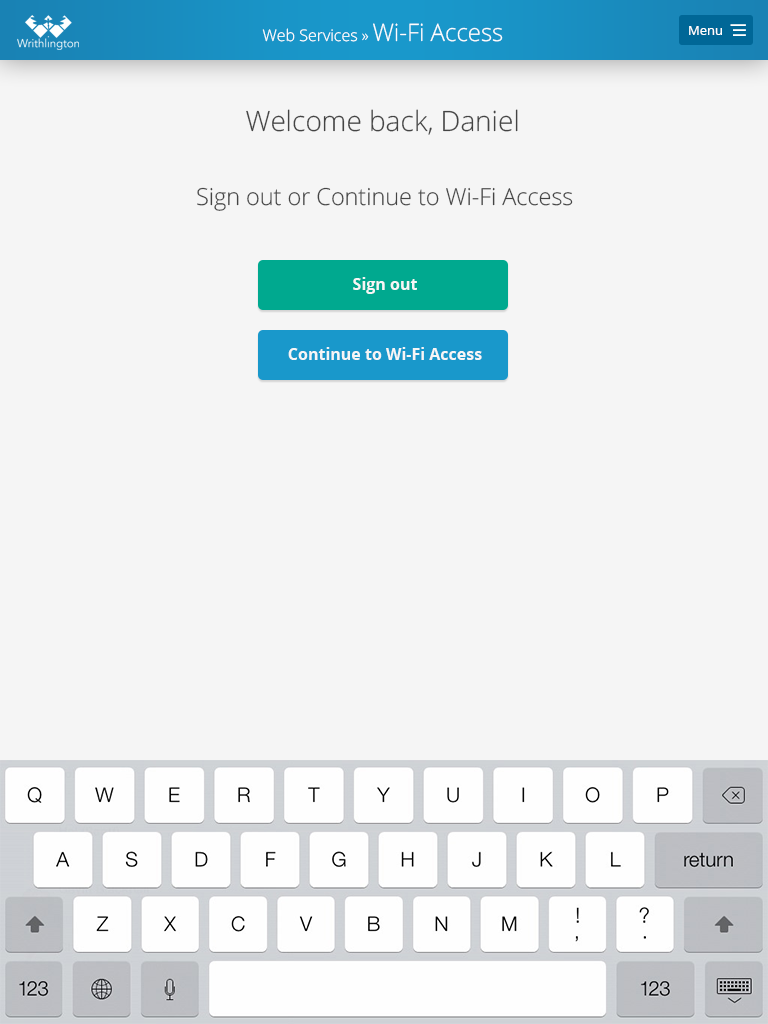
<style>
.page{position:relative;width:768px;height:1024px;background:#f5f5f5}
.page>*{position:absolute;margin:0}
.t1{font:16px "OpenSans-Light";color:#ffffff}
.t2{font:24px "OpenSans-Light";color:#ffffff}
.t3{font:13px "OpenSans";color:#ffffff}
.t4{font:28px "OpenSans-Light";color:#444444}
.t5{font:23.4px "OpenSans-Light";color:#444444}
.t6{font:16px "OpenSans-Bold";color:#f6f6f6}
</style>
<div class="page">
<p class="t1" style="left:262px;top:23px;width:241px;height:19px">Web Services » <span class="t2">Wi-Fi Access</span></p>
<p class="t3" style="left:689px;top:26px;width:33px;height:9px">Menu</p>
<p class="t4" style="left:246px;top:109px;width:272px;height:26px">Welcome back, Daniel</p>
<p class="t5" style="left:197px;top:187px;width:376px;height:24px">Sign out or Continue to Wi-Fi Access</p>
<p class="t6" style="left:353px;top:277px;width:64px;height:17px">Sign out</p>
<p class="t6" style="left:288px;top:347px;width:194px;height:13px">Continue to Wi-Fi Access</p>
</div>
